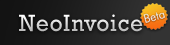
<style>
.page{position:relative;width:170px;height:45px}
.page>*{position:absolute;margin:0}
.t1{font:24px "Rockwell";letter-spacing:0.04em;scale:0.93 1}
</style>
<div class="page">
<p class="t1" style="left:19px;top:14px;width:124px;height:18px">NeoInvoice</p>
</div>
